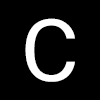
<style>
.page{position:relative;width:100px;height:100px;background:#000000}
.page>*{position:absolute;margin:0}
.t1{font:85px "PublicSans-Regular";color:#ffffff}
</style>
<div class="page">
<p class="t1" style="left:25px;top:18px;width:50px;height:64px">C</p>
</div>
